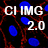
<style>
.page{position:relative;width:48px;height:48px}
.page>*{position:absolute;margin:0}
.t1{font:12px "ArialRoundedMTBold";color:#ffffff}
</style>
<div class="page">
<p class="t1" style="left:4px;top:6px;width:39px;height:9px">CI IMG</p>
<p class="t1" style="left:27px;top:21px;width:18px;height:9px">2.0</p>
</div>
